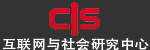
<style>
.page{position:relative;width:150px;height:50px;background:#333333}
.page>*{position:absolute;margin:0}
.t1{font:13px "AdobeHeitiStd-Regular";color:#ffffff;scale:1.12 1}
</style>
<div class="page">
<p class="t1" style="left:3px;top:38px;width:146px;height:13px">互联网与社会研究中心</p>
</div>
